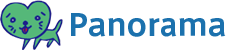
<style>
.page{position:relative;width:227px;height:50px;background:#ffffff}
.page>*{position:absolute;margin:0}
.t1{font:30px "AxisStd-Bold";color:#1b71ad}
</style>
<div class="page">
<p class="t1" style="left:71px;top:13px;width:155px;height:24px">Panorama</p>
</div>
